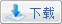
<style>
.page{position:relative;width:62px;height:24px;background:#f4f4f4}
.page>*{position:absolute;margin:0}
.t1{font:12px "SimSun";letter-spacing:0.075em;color:#3967a3}
</style>
<div class="page">
<p class="t1" style="left:30px;top:7px;width:24px;height:12px">下载</p>
</div>
